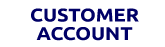
<style>
.page{position:relative;width:165px;height:47px;background:#ffffff}
.page>*{position:absolute;margin:0}
.t1{font:18.4px/18.4px "Ubuntu-Bold";color:#000066;scale:1.08 1}
</style>
<div class="page">
<p class="t1" style="left:31px;top:8px;width:108px;height:33px;text-align:center">CUSTOMER<br>ACCOUNT</p>
</div>
